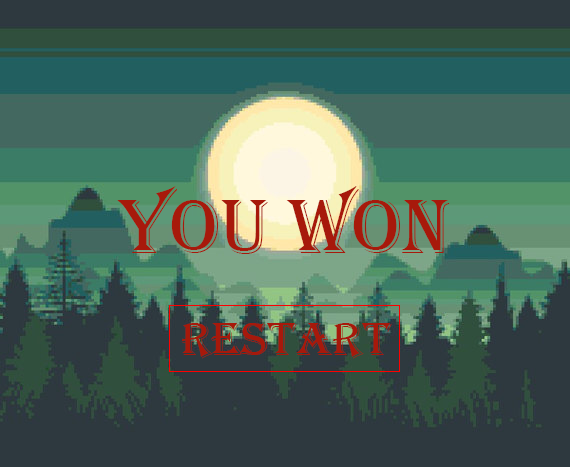
<style>
.page{position:relative;width:570px;height:467px;background:#2e393f}
.page>*{position:absolute;margin:0}
.t1{font:80px "Algerian";color:#a7190b}
.t2{font:48px "Algerian";color:#a7190b}
</style>
<div class="page">
<p class="t1" style="left:117px;top:186px;width:333px;height:68px">You Won</p>
<p class="t2" style="left:181px;top:323px;width:211px;height:36px">Restart</p>
</div>
